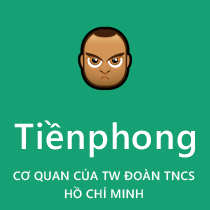
<style>
.page{position:relative;width:210px;height:210px;background:#16a175}
.page>*{position:absolute;margin:0}
.t1{font:36px "SegoeWP-Semibold";letter-spacing:0.025em;color:#ffffff}
.t2{font:12px "SegoeWP-Semibold";letter-spacing:0.025em;color:#fefefe}
</style>
<div class="page">
<p class="t1" style="left:14px;top:120px;width:181px;height:38px">Tiềnphong</p>
<p class="t2" style="left:13px;top:168px;width:182px;height:14px">CƠ QUAN CỦA TW ĐOÀN TNCS</p>
<p class="t2" style="left:64px;top:186px;width:79px;height:13px">HỒ CHÍ MINH</p>
</div>
